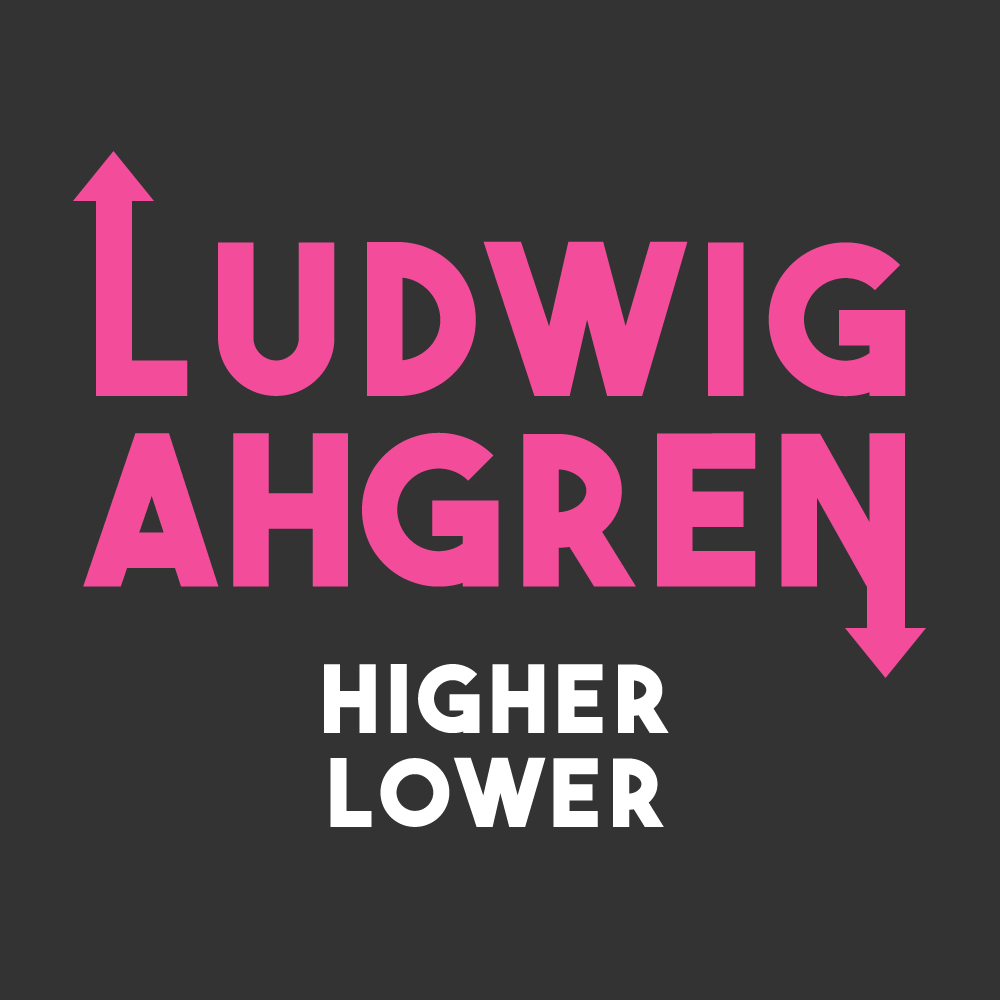
<style>
.page{position:relative;width:1000px;height:1000px;background:#333333}
.page>*{position:absolute;margin:0}
.t1{font:208.3px/190.5px "TheBoldFont";letter-spacing:0.08em;color:#f34c9a}
.t2{font:208.3px/190.5px "TheBoldFont";letter-spacing:0.04em;color:#f34c9a}
.t3{font:93.4px/94px "TheBoldFont";letter-spacing:0.08em;color:#ffffff}
</style>
<div class="page">
<p class="t1" style="left:83px;top:241px;width:823px;height:346px;text-align:center">LUDWIG<br><span class="t2">AHGREN</span></p>
<p class="t3" style="left:324px;top:664px;width:345px;height:163px;text-align:center">HIGHER<br>LOWER</p>
</div>
